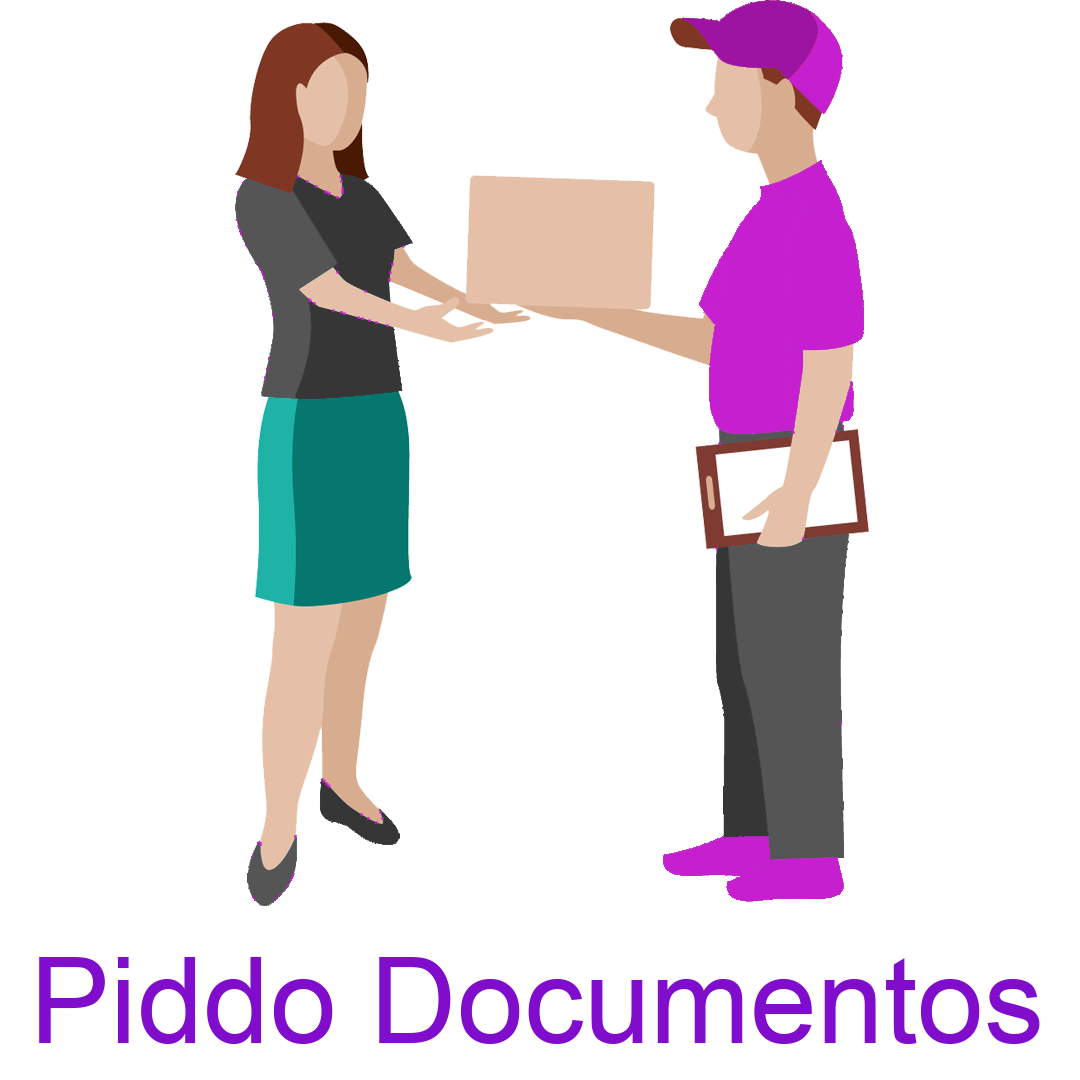
<style>
.page{position:relative;width:1080px;height:1080px;background:#ffffff}
.page>*{position:absolute;margin:0}
.t1{font:120px "ArialMT";color:#800dcc}
</style>
<div class="page">
<p class="t1" style="left:39px;top:957px;width:1001px;height:87px">Piddo Documentos</p>
</div>
